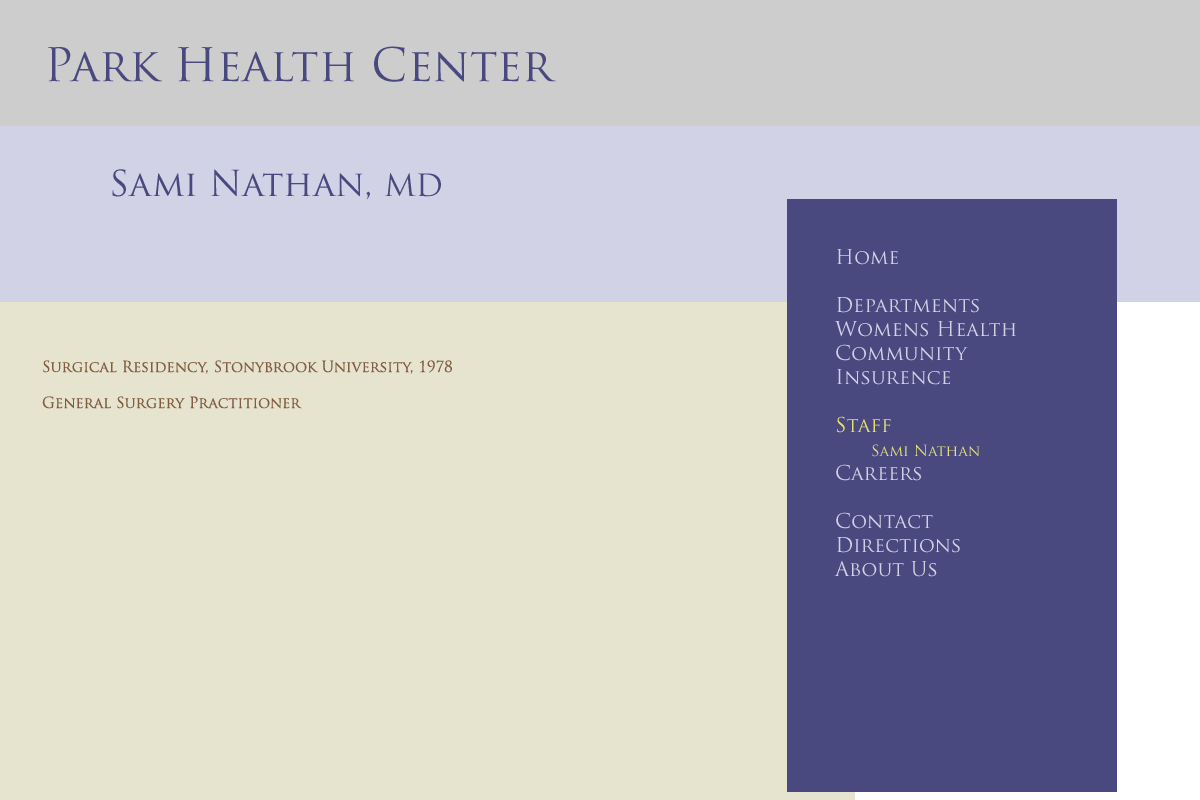
<style>
.page{position:relative;width:1200px;height:800px;background:#e6e3cf}
.page>*{position:absolute;margin:0}
.t1{font:45px "TrajanPro-Regular";color:#494980}
.t2{font:35px "TrajanPro-Regular";color:#494980}
.t3{font:30px "TrajanPro-Regular";color:#494980}
.t4{font:20px "TrajanPro-Regular";color:#d2d2e6}
.t5{font:20px "TrajanPro-Regular";color:#e6e073}
.t6{font:15px "TrajanPro-Regular";color:#e6e073}
.t7{font:15px "TrajanPro-Regular";color:#805d40}
</style>
<div class="page">
<p class="t1" style="left:48px;top:46px;width:508px;height:36px">Park Health Center</p>
<p class="t2" style="left:112px;top:169px;width:329px;height:31px">Sami Nathan, <span class="t3">MD</span></p>
<p class="t4" style="left:834px;top:249px;width:182px;height:328px">Home<br><br>Departments<br>Womens Health<br>Community<br>Insurence<br><br><span class="t5">Staff<br> </span><span class="t6">Sami Nathan<br></span>Careers<br><br>Contact<br>Directions<br>About Us</p>
<p class="t7" style="left:42px;top:360px;width:410px;height:49px">Surgical Residency, Stonybrook University, 1978<br><br>General Surgery Practitioner</p>
</div>
